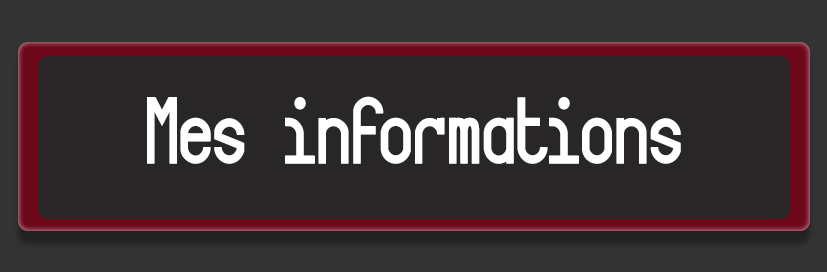
<style>
.page{position:relative;width:827px;height:272px;background:#292627}
.page>*{position:absolute;margin:0}
.t1{font:83.3px "Targa";color:#ffffff;scale:0.9 1}
</style>
<div class="page">
<p class="t1" style="left:147px;top:96px;width:534px;height:68px">Mes informations</p>
</div>
